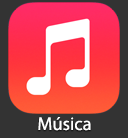
<style>
.page{position:relative;width:128px;height:138px;background:#333333}
.page>*{position:absolute;margin:0}
.t1{font:18.6px "MyriadPro-Regular";color:#ffffff}
</style>
<div class="page">
<p class="t1" style="left:38px;top:117px;width:53px;height:14px">Música</p>
</div>
